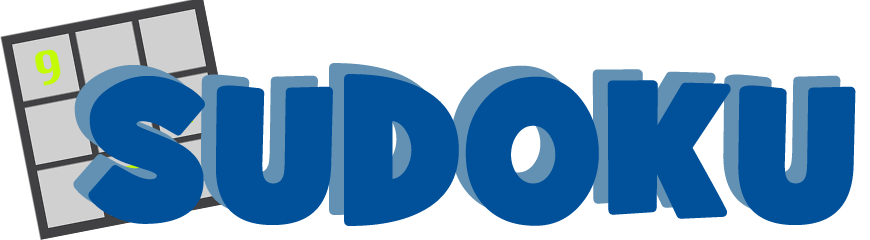
<style>
.page{position:relative;width:870px;height:240px;background:#ffffff}
.page>*{position:absolute;margin:0}
.t1{font:200px "GrilledCheeseBTNToasted";color:#00509a}
</style>
<div class="page">
<p class="t1" style="left:73px;top:63px;width:768px;height:152px">SUDOKU</p>
<p class="t1" style="left:88px;top:74px;width:768px;height:152px">SUDOKU</p>
</div>
